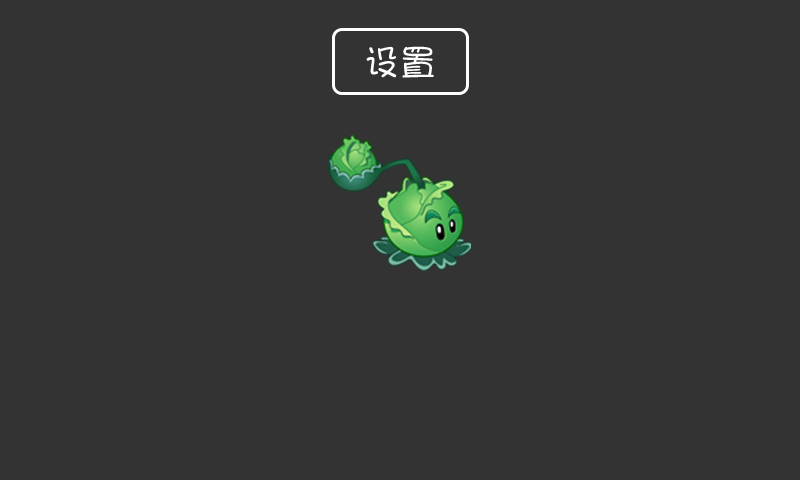
<style>
.page{position:relative;width:800px;height:480px;background:#333333}
.page>*{position:absolute;margin:0}
.t1{font:36px "DFShaoNvW5";color:#ffffff}
</style>
<div class="page">
<p class="t1" style="left:366px;top:46px;width:68px;height:32px">设置</p>
</div>
